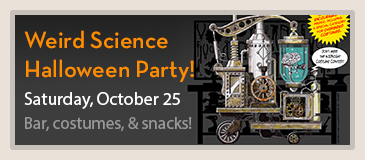
<style>
.page{position:relative;width:365px;height:160px}
.page>*{position:absolute;margin:0}
.t1{font:24px "NeutraTextTF-Demi";color:#ff8d00}
.t2{font:18px "MyriadPro-Regular";color:#ffffff}
.t3{font:17px "MyriadPro-Regular";color:#999999}
</style>
<div class="page">
<p class="t1" style="left:24px;top:30px;width:170px;height:52px">Weird Science<br>Halloween Party!</p>
<p class="t2" style="left:24px;top:92px;width:156px;height:17px">Saturday, October 25</p>
<p class="t3" style="left:25px;top:117px;width:167px;height:15px">Bar, costumes, &amp; snacks!</p>
</div>
